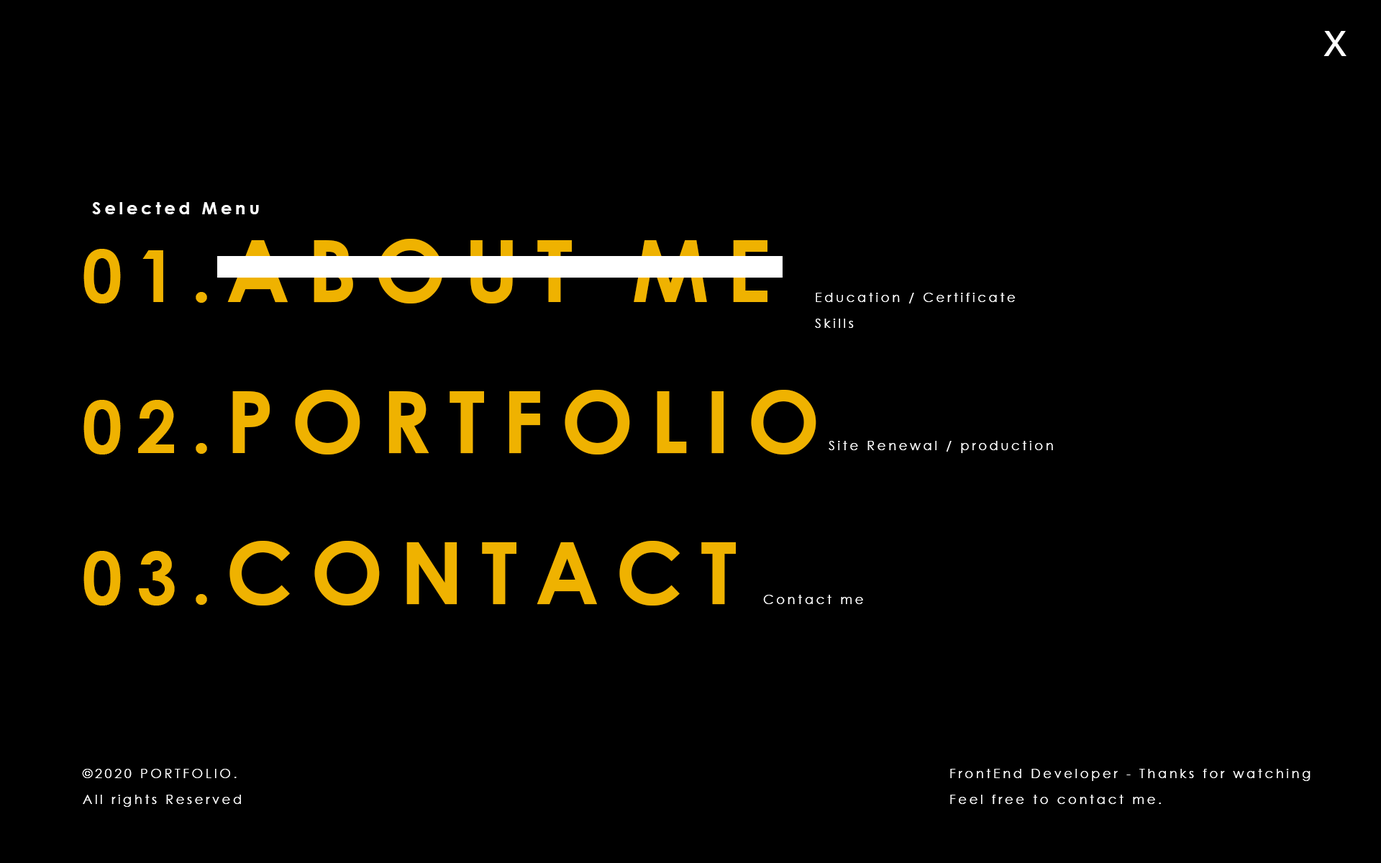
<style>
.page{position:relative;width:1381px;height:863px;background:#000000}
.page>*{position:absolute;margin:0}
.t1{font:34.5px "NanumGothicBold";letter-spacing:0.2em;color:#ffffff}
.t2{font:17.3px "CenturyGothic-Bold";letter-spacing:0.2em;color:#ffffff}
.t3{font:86.3px "CenturyGothic-Bold";letter-spacing:0.2em;color:#efb200}
.t4{font:71.9px "CenturyGothic-Bold";letter-spacing:0.2em;color:#efb200}
.t5{font:12.9px/25.9px "CenturyGothic";letter-spacing:0.2em;color:#ffffff}
.t6{font:12.9px "CenturyGothic";letter-spacing:0.2em;color:#ffffff}
</style>
<div class="page">
<p class="t1" style="left:1324px;top:31px;width:23px;height:25px">X</p>
<p class="t2" style="left:92px;top:202px;width:167px;height:12px">Selected Menu</p>
<p class="t3" style="left:83px;top:239px;width:734px;height:367px"><span class="t4">01.</span>ABOUT ME<br><span class="t4">02.</span>PORTFOLIO<br><span class="t4">03.</span>CONTACT</p>
<p class="t5" style="left:815px;top:293px;width:200px;height:35px">Education / Certificate<br>Skills</p>
<p class="t6" style="left:829px;top:441px;width:224px;height:12px">Site Renewal / production</p>
<p class="t6" style="left:763px;top:595px;width:100px;height:9px">Contact me</p>
<p class="t5" style="left:82px;top:769px;width:159px;height:38px">©2020 PORTFOLIO.<br>All rights Reserved</p>
<p class="t5" style="left:950px;top:769px;width:361px;height:35px">FrontEnd Developer - Thanks for watching<br>Feel free to contact me.</p>
</div>
